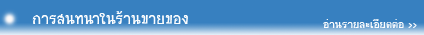
<style>
.page{position:relative;width:424px;height:35px;background:#3780c0}
.page>*{position:absolute;margin:0}
.t1{font:22px "2005_iannnnnGMO";color:#fcfdfe}
.t2{font:16px "2005_iannnnnGMO";color:#fcfdfe}
</style>
<div class="page">
<p class="t1" style="left:32px;top:11px;width:156px;height:13px">การสนทนาในร้านขายของ</p>
<p class="t2" style="left:323px;top:19px;width:94px;height:9px">อ่านรายละเอียดต่อ &gt;&gt;</p>
</div>
